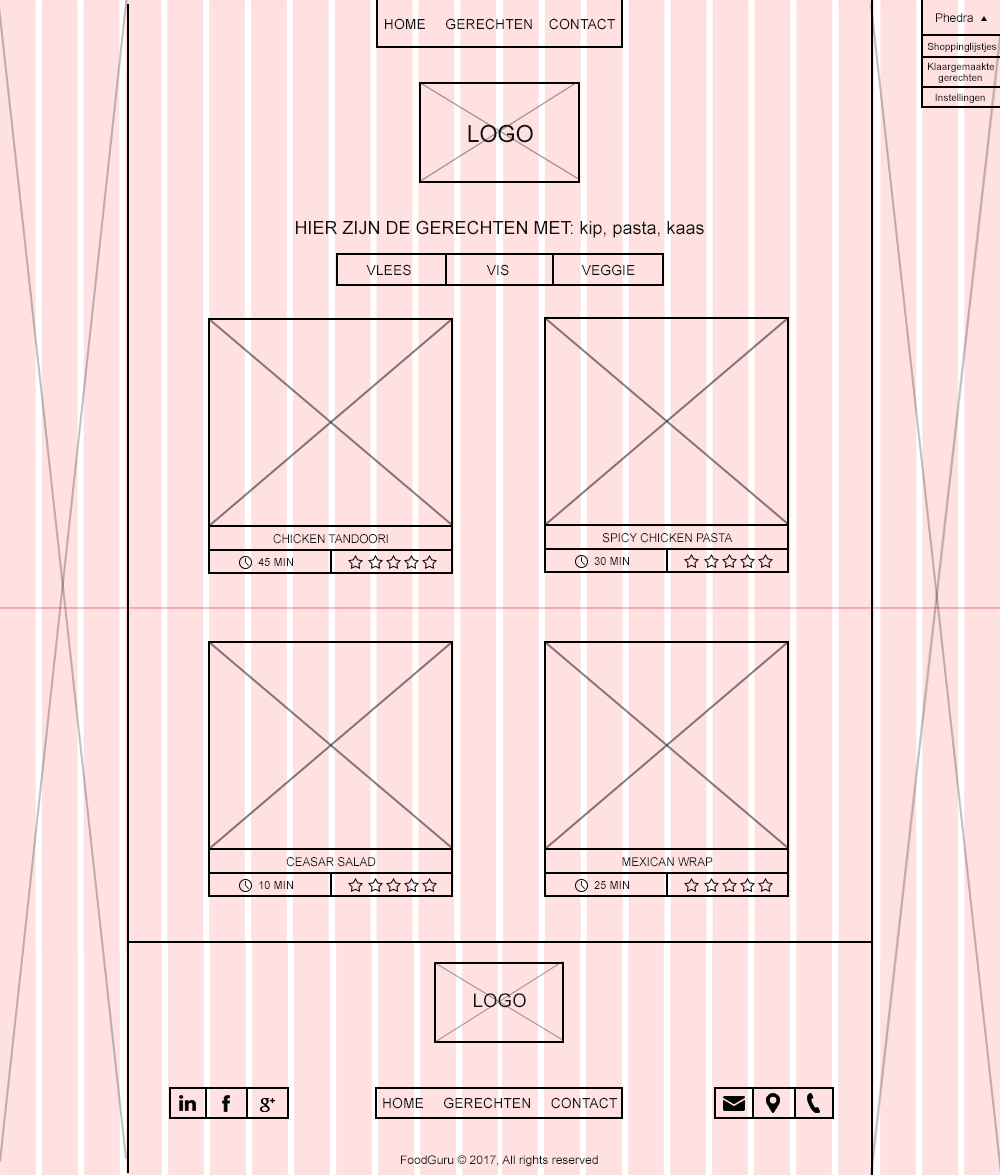
<style>
.page{position:relative;width:1000px;height:1175px;background:#ffe1e1}
.page>*{position:absolute;margin:0}
.t1{font:12px "ArialMT";color:#111111}
.t2{font:14px "ArialMT";color:#111111}
.t3{font:10px "ArialMT";color:#111111}
.t4{font:23.5px "ArialMT";color:#111111}
.t5{font:18px "ArialMT";color:#111111}
.t6{font:11px "ArialMT";color:#111111}
</style>
<div class="page">
<p class="t1" style="left:936px;top:13px;width:37px;height:9px">Phedra</p>
<p class="t2" style="left:385px;top:18px;width:230px;height:12px">HOME     GERECHTEN    CONTACT</p>
<p class="t3" style="left:927px;top:42px;width:70px;height:10px">Shoppinglijstjes</p>
<p class="t3" style="left:928px;top:62px;width:66px;height:10px">Klaargemaakte</p>
<p class="t3" style="left:938px;top:73px;width:44px;height:10px">gerechten</p>
<p class="t3" style="left:935px;top:93px;width:50px;height:10px">Instellingen</p>
<p class="t4" style="left:468px;top:124px;width:65px;height:19px">LOGO</p>
<p class="t5" style="left:296px;top:220px;width:408px;height:18px">HIER ZIJN DE GERECHTEN MET: kip, pasta, kaas</p>
<p class="t2" style="left:366px;top:264px;width:45px;height:12px">VLEES</p>
<p class="t2" style="left:486px;top:264px;width:23px;height:12px">VIS</p>
<p class="t2" style="left:581px;top:264px;width:54px;height:12px">VEGGIE</p>
<p class="t1" style="left:273px;top:534px;width:115px;height:10px">CHICKEN TANDOORI</p>
<p class="t1" style="left:602px;top:533px;width:131px;height:10px">SPICY CHICKEN PASTA</p>
<p class="t6" style="left:258px;top:558px;width:35px;height:8px">45 MIN</p>
<p class="t6" style="left:594px;top:557px;width:35px;height:8px">30 MIN</p>
<p class="t1" style="left:286px;top:857px;width:90px;height:10px">CEASAR SALAD</p>
<p class="t1" style="left:622px;top:857px;width:91px;height:10px">MEXICAN WRAP</p>
<p class="t6" style="left:259px;top:881px;width:34px;height:8px">10 MIN</p>
<p class="t6" style="left:594px;top:881px;width:35px;height:8px">25 MIN</p>
</div>
